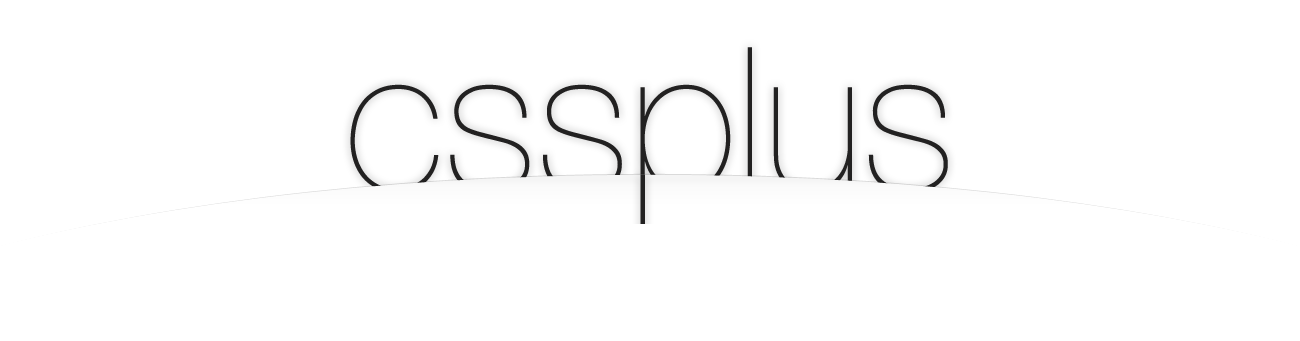
<style>
.page{position:relative;width:1300px;height:341px;background:#ffffff}
.page>*{position:absolute;margin:0}
.t1{font:200px "HelveticaNeue-UltraLight";color:#222121}
</style>
<div class="page">
<p class="t1" style="left:350px;top:47px;width:598px;height:179px">cssplus</p>
</div>
